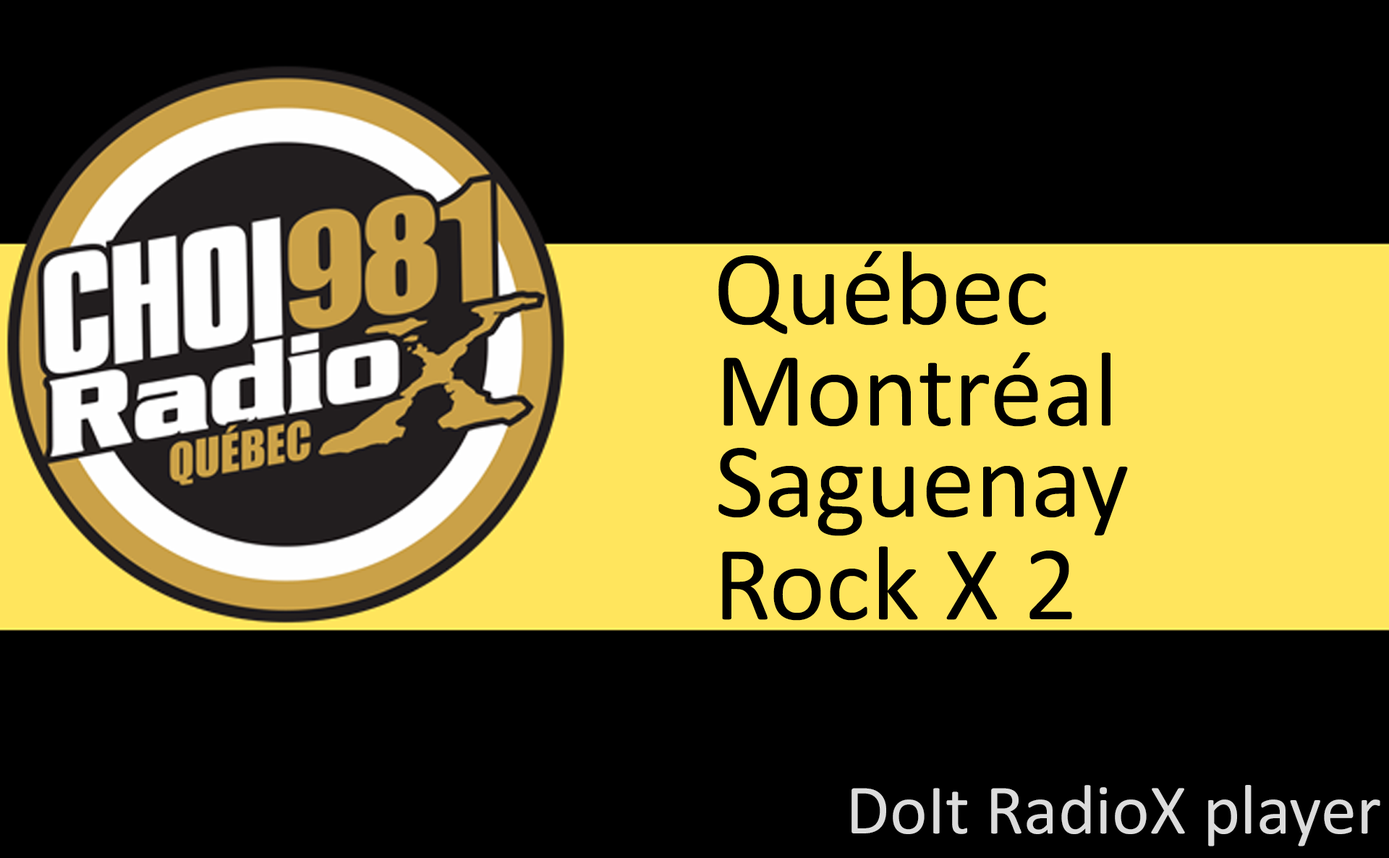
<style>
.page{position:relative;width:1389px;height:858px;background:#000000}
.page>*{position:absolute;margin:0}
.t1{font:107px "Calibri";color:#000000}
.t2{font:71.4px "Calibri";color:#dcdcdc}
</style>
<div class="page">
<p class="t1" style="left:719px;top:250px;width:327px;height:84px">Québec</p>
<p class="t1" style="left:724px;top:352px;width:387px;height:75px">Montréal</p>
<p class="t1" style="left:719px;top:448px;width:409px;height:88px">Saguenay</p>
<p class="t1" style="left:722px;top:546px;width:350px;height:75px">Rock X 2</p>
<p class="t2" style="left:852px;top:785px;width:529px;height:62px">DoIt RadioX player</p>
</div>
